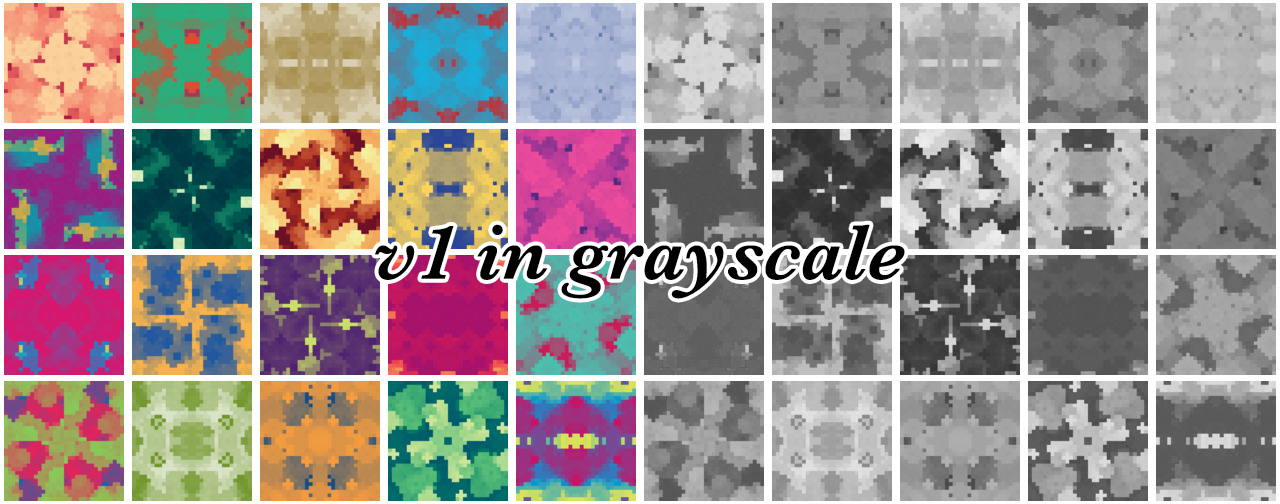
<style>
.page{position:relative;width:1280px;height:504px}
.page>*{position:absolute;margin:0}
.t1{font:80px "Baskerville-SemiBoldItalic";color:#000000}
</style>
<div class="page">
<p class="t1" style="left:375px;top:224px;width:530px;height:75px">v1 in grayscale</p>
</div>
